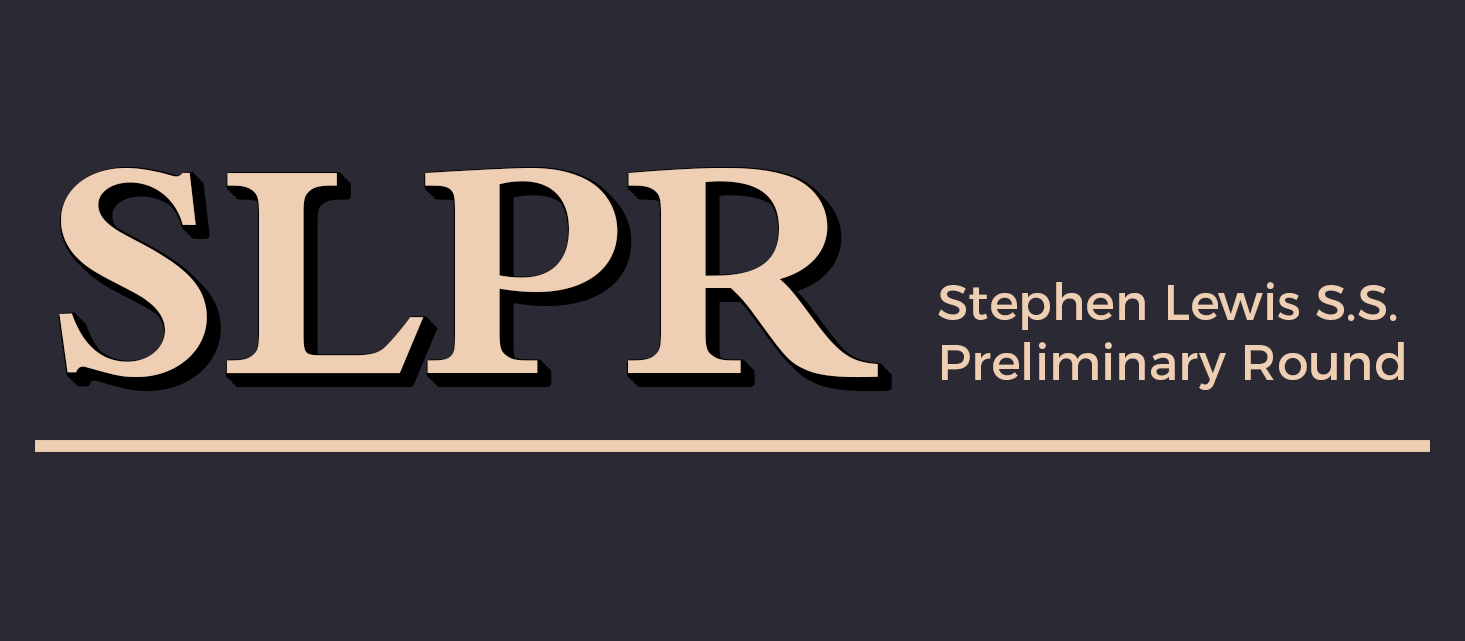
<style>
.page{position:relative;width:1465px;height:641px;background:#2b2934}
.page>*{position:absolute;margin:0}
.t1{font:300px "BergamoPro-Bold";color:#eecfb3}
.t2{font:50px "Montserrat-Regular";color:#eecfb3}
</style>
<div class="page">
<p class="t1" style="left:59px;top:167px;width:819px;height:211px">SLPR</p>
<p class="t2" style="left:938px;top:282px;width:466px;height:108px">Stephen Lewis S.S. <br>Preliminary Round</p>
</div>
